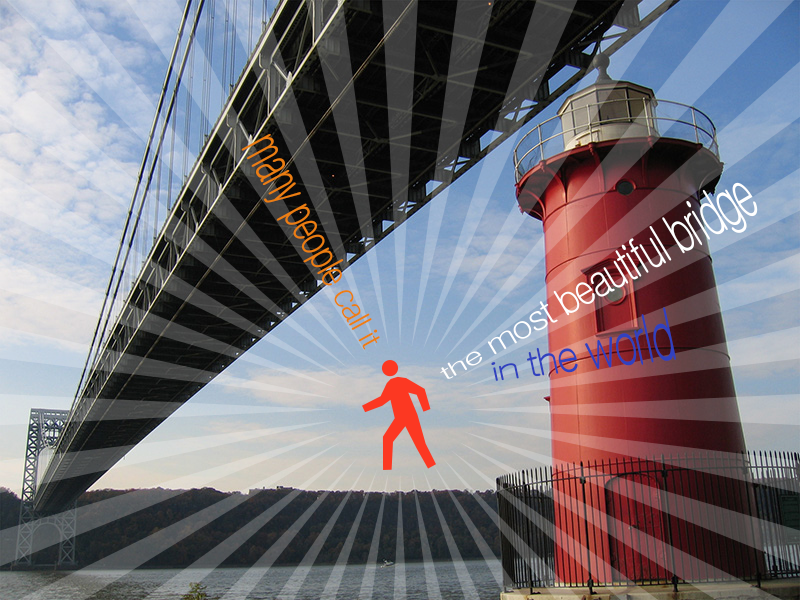
<style>
.page{position:relative;width:800px;height:600px}
.page>*{position:absolute;margin:0}
.t1{font:45px "Gulim";letter-spacing:-0.07em;color:#ec7e12;scale:0.7 1}
.t2{font:45px "Gulim";letter-spacing:-0.07em;color:#ffffff;scale:0.8 1}
.t3{font:50px "Gulim";letter-spacing:-0.07em;color:#3141bf;scale:0.8 1}
</style>
<div class="page">
<p class="t1" style="left:241px;top:134px;width:139px;height:216px;rotate:61deg">many people call it</p>
<p class="t2" style="left:440px;top:182px;width:318px;height:197px;rotate:-31deg">the most beautiful bridge</p>
<p class="t3" style="left:491px;top:307px;width:185px;height:74px;rotate:-12deg">in the world</p>
</div>
